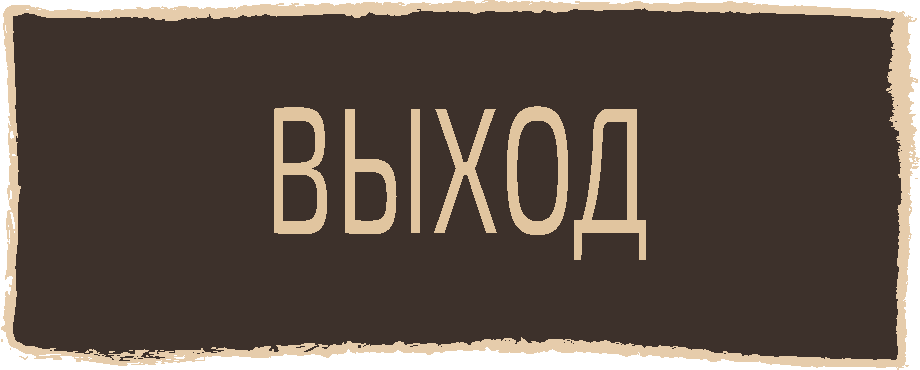
<style>
.page{position:relative;width:920px;height:370px;background:#3d312b}
.page>*{position:absolute;margin:0}
.t1{font:180.2px "Exo2-Regular";color:#e2c59f;text-transform:uppercase;scale:0.62 1}
</style>
<div class="page">
<p class="t1" style="left:274px;top:106px;width:372px;height:154px">выход</p>
</div>
